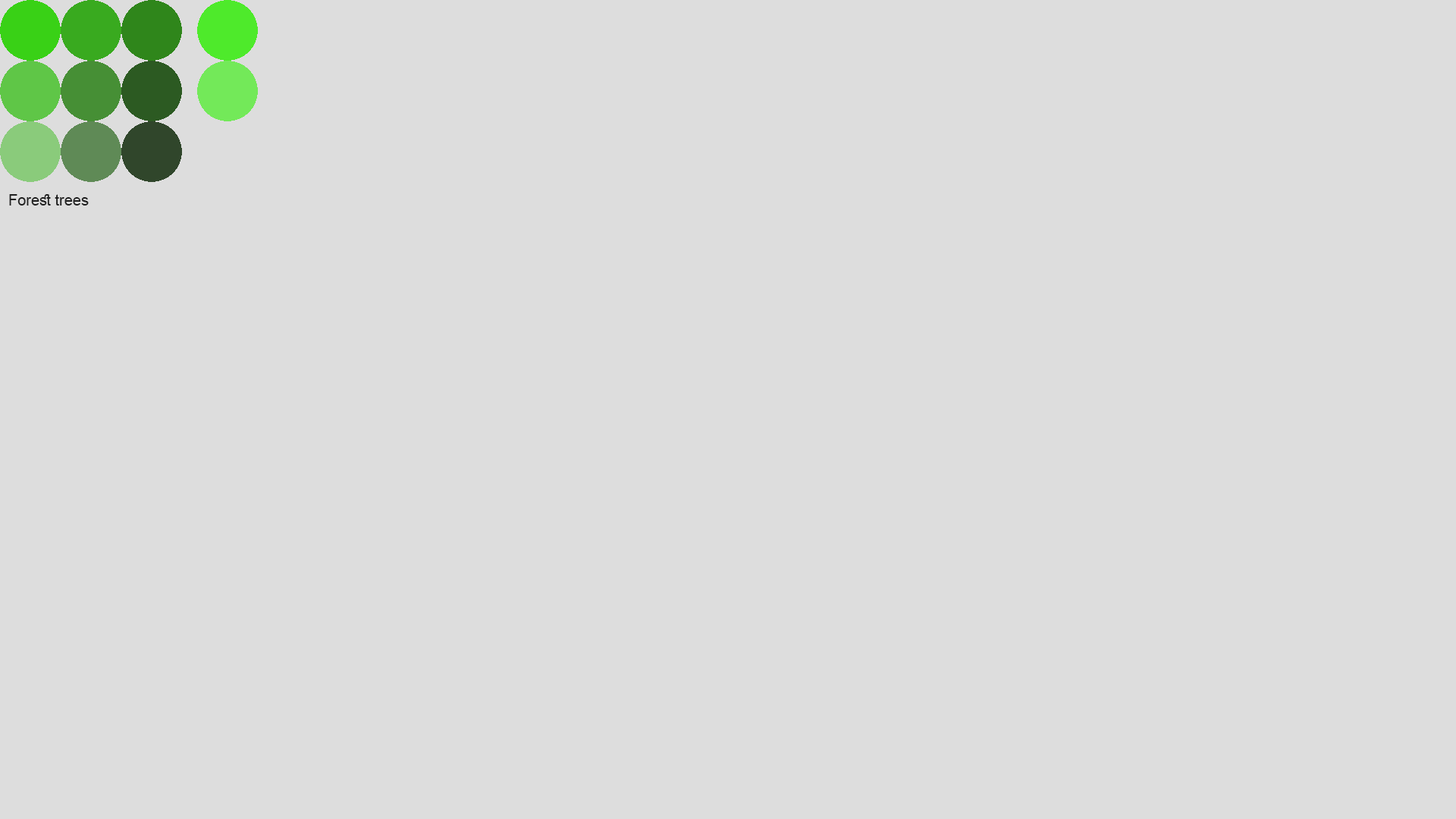
<style>
.page{position:relative;width:1456px;height:819px;background:#dddddd}
.page>*{position:absolute;margin:0}
.t1{font:15.2px "ArialMT";color:#1f1f1f}
</style>
<div class="page">
<p class="t1" style="left:9px;top:194px;width:80px;height:12px">Forest trees</p>
</div>
